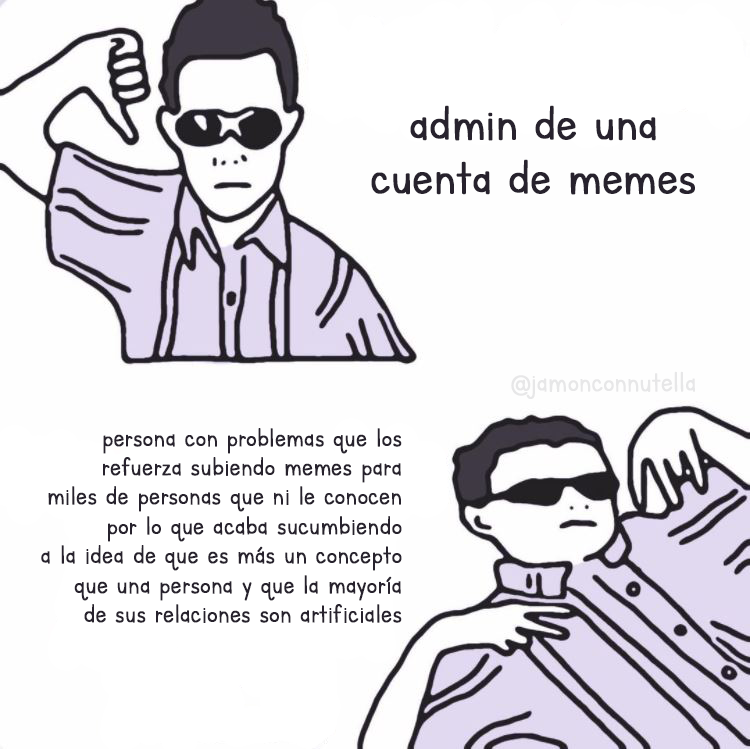
<style>
.page{position:relative;width:750px;height:749px;background:#fefefe}
.page>*{position:absolute;margin:0}
.t1{font:56.8px "LettersforLearners";color:#27222d;font-weight:bold;scale:0.91 1}
.t2{font:32.7px "LettersforLearners";color:#e7e7e8;font-weight:bold;scale:0.9 1}
.t3{font:30.6px "LettersforLearners";color:#27222d;font-weight:bold;scale:0.9 1}
</style>
<div class="page">
<p class="t1" style="left:371px;top:105px;width:324px;height:90px;text-align:center">admin de una<br>cuenta de memes</p>
<p class="t2" style="left:511px;top:371px;width:184px;height:28px">@jamonconnutella</p>
<p class="t3" style="left:41px;top:428px;width:361px;height:195px;text-align:right">persona con problemas que los<br>refuerza subiendo memes para<br>miles de personas que ni le conocen<br>por lo que acaba sucumbiendo<br>a la idea de que es más un concepto<br>que una persona y que la mayoría<br>de sus relaciones son artificiales</p>
</div>
